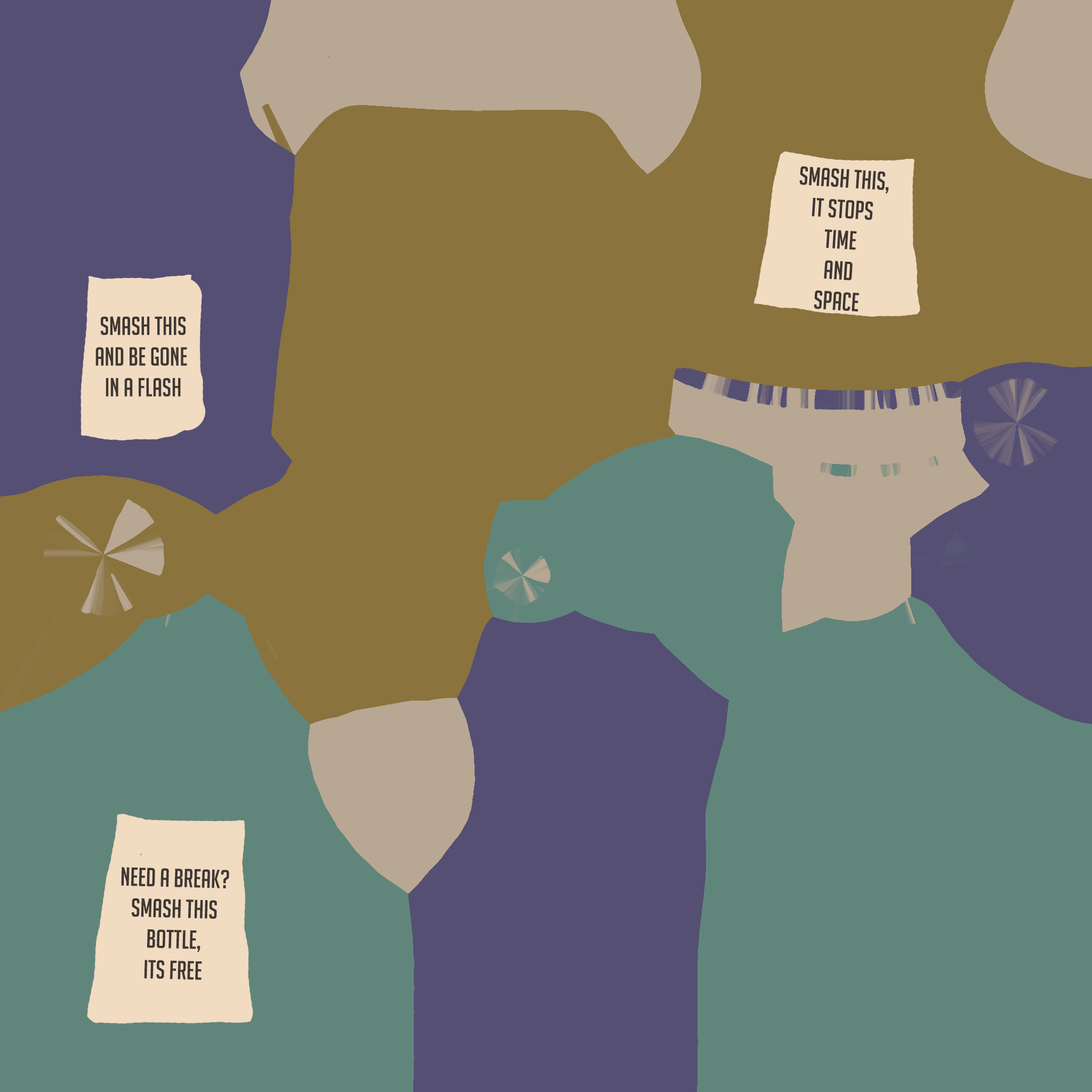
<style>
.page{position:relative;width:1092px;height:1092px;background:#60867c}
.page>*{position:absolute;margin:0}
.t1{font:25.6px "BigNoodleTitling";color:#3e3733}
</style>
<div class="page">
<p class="t1" style="left:799px;top:166px;width:90px;height:146px;text-align:center;rotate:4deg">Smash This,<br>it stops<br>time<br>and<br>Space</p>
<p class="t1" style="left:95px;top:316px;width:92px;height:81px;text-align:center">Smash This<br>and Be Gone <br>in a Flash</p>
<p class="t1" style="left:121px;top:867px;width:108px;height:113px;text-align:center;rotate:1deg">Need a Break?<br>Smash This Bottle,<br>Its Free</p>
</div>
